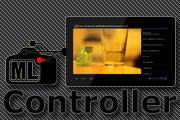
<style>
.page{position:relative;width:180px;height:120px}
.page>*{position:absolute;margin:0}
.t1{font:31.2px "Verdana-Bold";color:#000000}
</style>
<div class="page">
<p class="t1" style="left:3px;top:89px;width:174px;height:25px">Controller</p>
</div>
